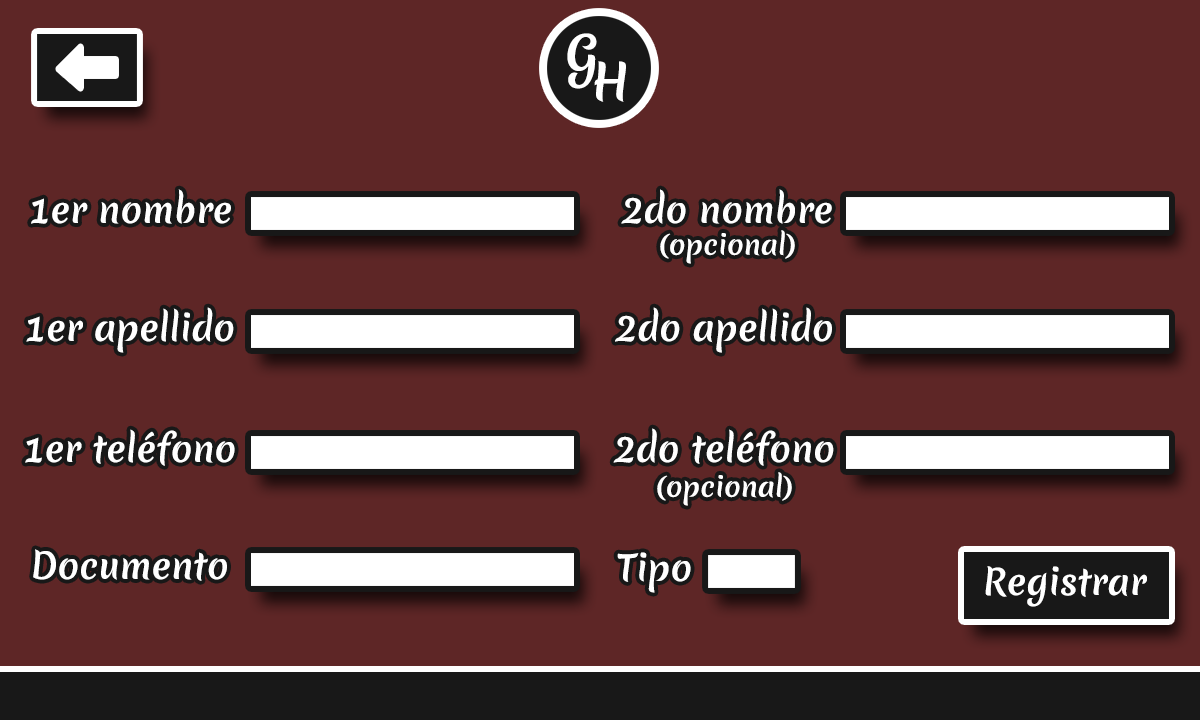
<style>
.page{position:relative;width:1200px;height:720px;background:#5e2626}
.page>*{position:absolute;margin:0}
.t1{font:48.4px "MeriendaOne-Regular";color:#ffffff}
.t2{font:35.1px "MeriendaOne-Regular";color:#ffffff}
.t3{font:26.8px "MeriendaOne-Regular";color:#ffffff}
</style>
<div class="page">
<p class="t1" style="left:567px;top:33px;width:30px;height:56px">G</p>
<p class="t1" style="left:594px;top:61px;width:32px;height:41px">H</p>
<p class="t2" style="left:31px;top:189px;width:200px;height:35px">1er nombre</p>
<p class="t2" style="left:621px;top:189px;width:211px;height:35px">2do nombre</p>
<p class="t3" style="left:660px;top:230px;width:135px;height:34px">(opcional)</p>
<p class="t2" style="left:26px;top:307px;width:208px;height:46px">1er apellido</p>
<p class="t2" style="left:615px;top:307px;width:217px;height:46px">2do apellido</p>
<p class="t2" style="left:25px;top:429px;width:210px;height:37px">1er teléfono</p>
<p class="t2" style="left:613px;top:428px;width:221px;height:38px">2do teléfono</p>
<p class="t3" style="left:657px;top:472px;width:135px;height:34px">(opcional)</p>
<p class="t2" style="left:33px;top:549px;width:194px;height:32px">Documento</p>
<p class="t2" style="left:617px;top:552px;width:74px;height:41px">Tipo</p>
<p class="t2" style="left:985px;top:566px;width:162px;height:41px">Registrar</p>
</div>
